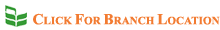
<style>
.page{position:relative;width:220px;height:30px;background:#ffffff}
.page>*{position:absolute;margin:0}
.t1{font:11.1px "TimesNewRomanPS-BoldMT";color:#f27b31;text-transform:uppercase}
.t2{font:15.3px "TimesNewRomanPS-BoldMT";color:#f27b31;text-transform:uppercase}
</style>
<div class="page">
<p class="t1" style="left:33px;top:13px;width:187px;height:12px"><span class="t2">C</span>LICK <span class="t2">F</span>OR <span class="t2">B</span>RANCH <span class="t2">L</span>OCATION</p>
</div>
